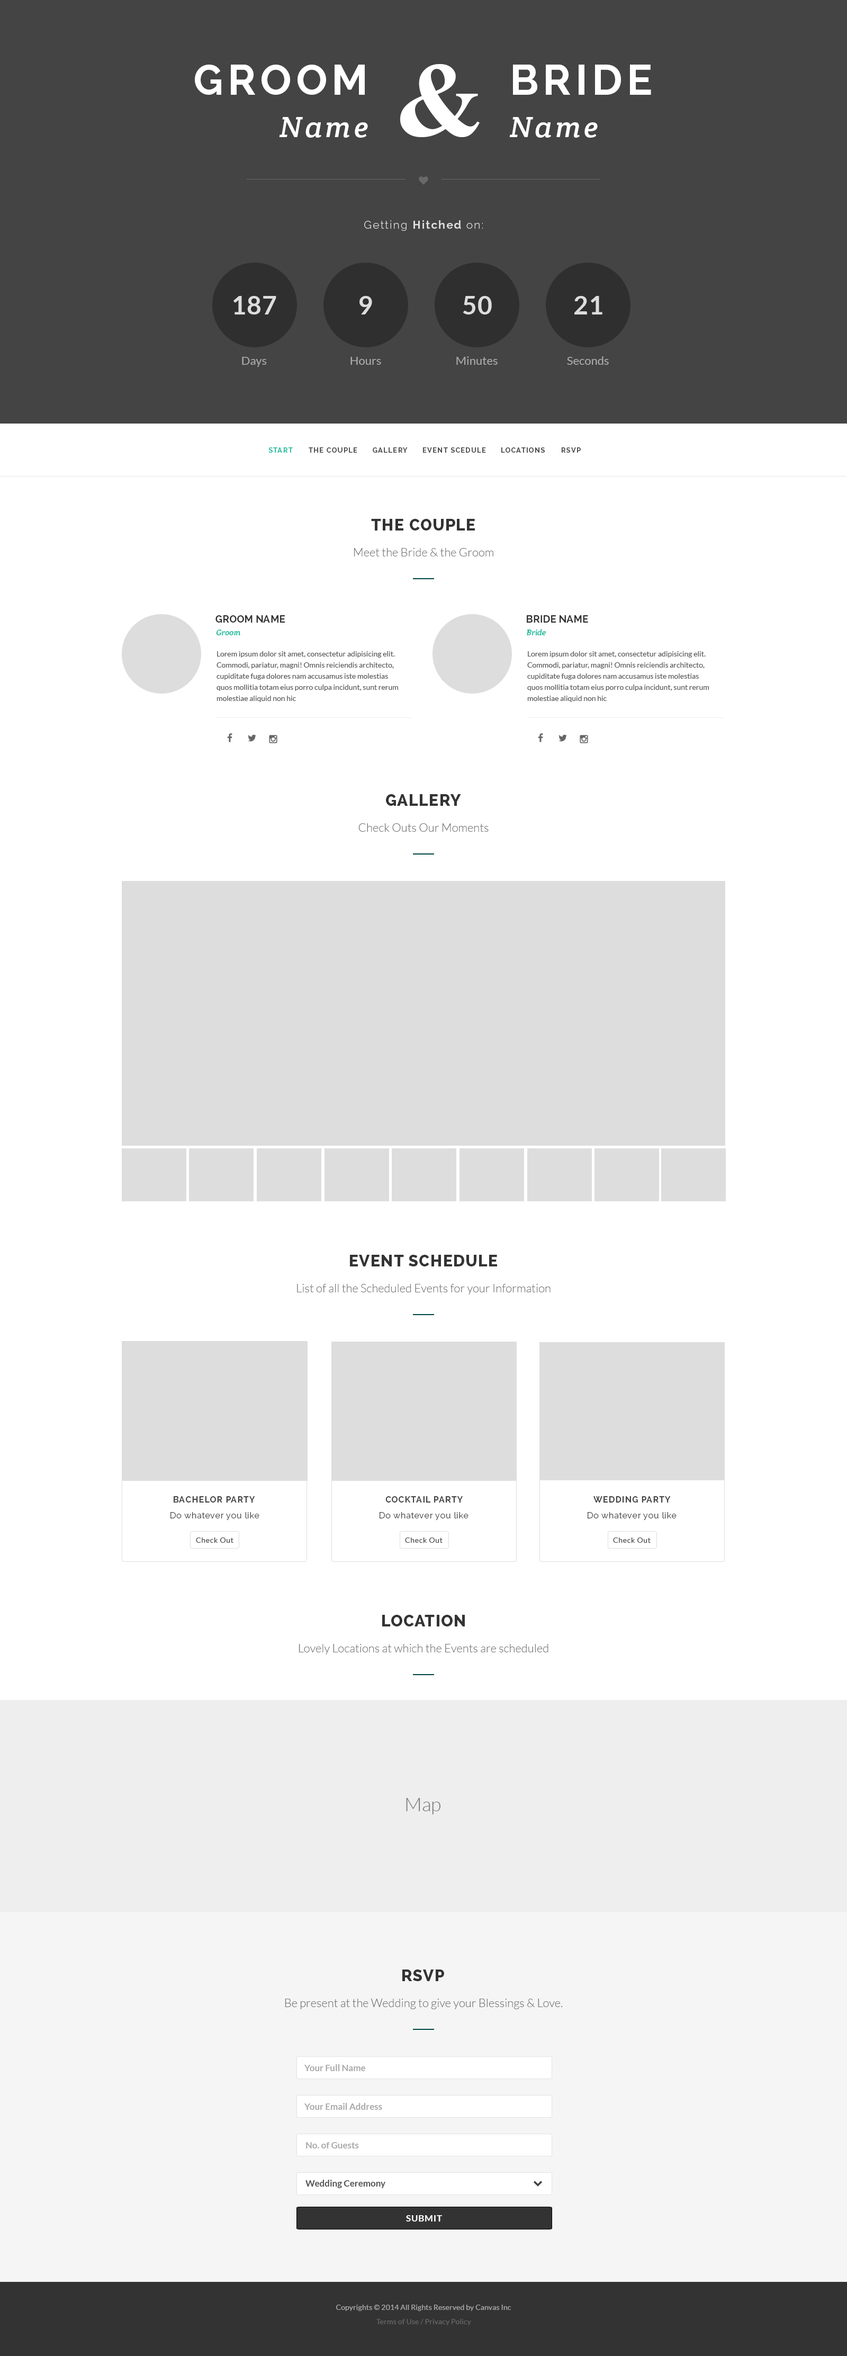
<style>
.page{position:relative;width:847px;height:2356px;background:#ffffff}
.page>*{position:absolute;margin:0}
.t1{font:42.4px/42.4px "Raleway-Bold";letter-spacing:0.1em;color:#ffffff;text-transform:uppercase}
.t2{font:29.6px/42.4px "CreteRound-Italic";letter-spacing:0.1em;color:#ffffff}
.t3{font:105.9px "TimesNewRomanPS-BoldMT";letter-spacing:0.1em;color:#ffffff;text-transform:uppercase}
.t4{font:11.1px "Raleway-Light";letter-spacing:0.1em;color:#dddddd}
.t5{font:11.1px "Raleway-Bold";letter-spacing:0.1em;color:#dddddd}
.t6{font:25.4px "Lato-Bold";letter-spacing:0.025em;color:#dddddd}
.t7{font:11.6px "Lato-Regular";color:#aaaaaa}
.t8{font:6.9px "Raleway-Bold";letter-spacing:0.1em;color:#1abc9c;text-transform:uppercase}
.t9{font:6.9px "Raleway-Bold";letter-spacing:0.1em;color:#444444;text-transform:uppercase}
.t10{font:15.9px "Raleway-ExtraBold";letter-spacing:0.05em;color:#333333;text-transform:uppercase}
.t11{font:11.6px "Lato-Light";color:#777777}
.t12{font:10.1px "Raleway-Bold";letter-spacing:0.01em;color:#333333;text-transform:uppercase}
.t13{font:7.9px "CreteRound-Italic";color:#1abc9c}
.t14{font:7.4px/11.1px "Lato-Regular";color:#555555}
.t15{font:8.5px "Raleway-Bold";letter-spacing:0.07em;color:#444444;text-transform:uppercase}
.t16{font:8.5px "Raleway-Regular";letter-spacing:0.05em;color:#444444}
.t17{font:7.4px "Lato-Regular";letter-spacing:0.05em;color:#444444}
.t18{font:19.1px "Lato-Light";color:#777777}
.t19{font:9px "Lato-Bold";color:#aaaaaa}
.t20{font:9px "Lato-Bold";color:#555555}
.t21{font:9px "Lato-Bold";letter-spacing:0.05em;color:#ffffff;text-transform:uppercase}
.t22{font:7.4px "Lato-Regular";letter-spacing:0.01em;color:#aaaaaa}
.t23{font:7.4px "Lato-Regular";letter-spacing:0.01em;color:#666666}
</style>
<div class="page">
<p class="t1" style="left:195px;top:65px;width:173px;height:73px;text-align:right">Groom<br><span class="t2">Name</span></p>
<p class="t3" style="left:400px;top:64px;width:80px;height:73px">&amp;</p>
<p class="t1" style="left:509px;top:65px;width:142px;height:73px">Bride<br><span class="t2">Name</span></p>
<p class="t4" style="left:364px;top:220px;width:119px;height:11px">Getting <span class="t5">Hitched </span>on:</p>
<p class="t6" style="left:233px;top:296px;width:43px;height:18px">187</p>
<p class="t6" style="left:359px;top:296px;width:13px;height:18px">9</p>
<p class="t6" style="left:463px;top:296px;width:29px;height:18px">50</p>
<p class="t6" style="left:574px;top:296px;width:28px;height:18px">21</p>
<p class="t7" style="left:242px;top:357px;width:25px;height:10px">Days</p>
<p class="t7" style="left:350px;top:357px;width:31px;height:8px">Hours</p>
<p class="t7" style="left:456px;top:356px;width:42px;height:9px">Minutes</p>
<p class="t7" style="left:567px;top:356px;width:42px;height:9px">Seconds</p>
<p class="t8" style="left:268px;top:447px;width:25px;height:6px">Start</p>
<p class="t9" style="left:309px;top:447px;width:48px;height:6px">The Couple</p>
<p class="t9" style="left:373px;top:447px;width:35px;height:6px">Gallery</p>
<p class="t9" style="left:423px;top:447px;width:63px;height:6px">Event Scedule</p>
<p class="t9" style="left:501px;top:447px;width:44px;height:6px">Locations</p>
<p class="t9" style="left:562px;top:447px;width:19px;height:6px">RSVP</p>
<p class="t10" style="left:371px;top:519px;width:104px;height:11px">The Couple</p>
<p class="t11" style="left:354px;top:548px;width:139px;height:8px">Meet the Bride &amp; the Groom</p>
<p class="t12" style="left:215px;top:615px;width:70px;height:8px">Groom Name</p>
<p class="t12" style="left:527px;top:615px;width:61px;height:8px">Bride Name</p>
<p class="t13" style="left:216px;top:629px;width:24px;height:6px">Groom</p>
<p class="t13" style="left:527px;top:629px;width:19px;height:6px">Bride</p>
<p class="t14" style="left:217px;top:651px;width:181px;height:51px">Lorem ipsum dolor sit amet, consectetur adipisicing elit.<br>Commodi, pariatur, magni! Omnis reiciendis architecto,<br>cupiditate fuga dolores nam accusamus iste molestias<br>quos mollitia totam eius porro culpa incidunt, sunt rerum<br>molestiae aliquid non hic</p>
<p class="t14" style="left:527px;top:651px;width:182px;height:51px">Lorem ipsum dolor sit amet, consectetur adipisicing elit.<br>Commodi, pariatur, magni! Omnis reiciendis architecto,<br>cupiditate fuga dolores nam accusamus iste molestias<br>quos mollitia totam eius porro culpa incidunt, sunt rerum<br>molestiae aliquid non hic</p>
<p class="t10" style="left:386px;top:794px;width:75px;height:12px">Gallery</p>
<p class="t11" style="left:358px;top:823px;width:131px;height:9px">Check Outs Our Moments</p>
<p class="t10" style="left:350px;top:1255px;width:147px;height:11px">Event Schedule</p>
<p class="t11" style="left:297px;top:1284px;width:254px;height:10px">List of all the Scheduled Events for your Information</p>
<p class="t15" style="left:174px;top:1496px;width:81px;height:6px">Bachelor Party</p>
<p class="t15" style="left:385px;top:1496px;width:78px;height:6px">Cocktail Party</p>
<p class="t15" style="left:593px;top:1496px;width:78px;height:6px">Wedding Party</p>
<p class="t16" style="left:170px;top:1512px;width:89px;height:8px">Do whatever you like</p>
<p class="t16" style="left:380px;top:1512px;width:89px;height:8px">Do whatever you like</p>
<p class="t16" style="left:588px;top:1512px;width:89px;height:8px">Do whatever you like</p>
<p class="t17" style="left:196px;top:1537px;width:37px;height:6px">Check Out</p>
<p class="t17" style="left:405px;top:1537px;width:38px;height:6px">Check Out</p>
<p class="t17" style="left:613px;top:1537px;width:38px;height:6px">Check Out</p>
<p class="t10" style="left:382px;top:1615px;width:83px;height:11px">Location</p>
<p class="t11" style="left:299px;top:1644px;width:249px;height:10px">Lovely Locations at which the Events are scheduled</p>
<p class="t18" style="left:406px;top:1798px;width:34px;height:16px">Map</p>
<p class="t10" style="left:402px;top:1969px;width:42px;height:12px">RSVP</p>
<p class="t11" style="left:285px;top:1999px;width:278px;height:10px">Be present at the Wedding to give your Blessings &amp; Love.</p>
<p class="t19" style="left:304px;top:2064px;width:61px;height:7px">Your Full Name</p>
<p class="t19" style="left:304px;top:2103px;width:78px;height:7px">Your Email Address</p>
<p class="t19" style="left:306px;top:2142px;width:53px;height:6px">No. of Guests</p>
<p class="t20" style="left:305px;top:2180px;width:80px;height:8px">Wedding Ceremony</p>
<p class="t21" style="left:406px;top:2215px;width:36px;height:6px">Submit</p>
<p class="t22" style="left:336px;top:2305px;width:175px;height:6px">Copyrights © 2014 All Rights Reserved by Canvas Inc</p>
<p class="t23" style="left:376px;top:2319px;width:95px;height:6px">Terms of Use / Privacy Policy</p>
</div>
